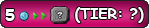
<style>
.page{position:relative;width:149px;height:28px}
.page>*{position:absolute;margin:0}
.t1{font:12px "ComicSansMS-Bold";color:#ffffff}
.t2{font:14.7px "ComicSansMS-Bold";color:#ffffff}
</style>
<div class="page">
<p class="t1" style="left:5px;top:9px;width:10px;height:12px">5</p>
<p class="t2" style="left:75px;top:7px;width:69px;height:16px">(TIER: ?)</p>
</div>
